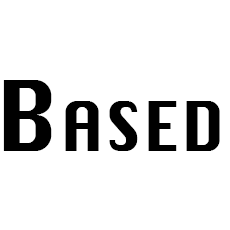
<style>
.page{position:relative;width:230px;height:230px;background:#ffffff}
.page>*{position:absolute;margin:0}
.t1{font:94.8px "Silom";color:#000000;font-variant:small-caps}
</style>
<div class="page">
<p class="t1" style="left:3px;top:80px;width:217px;height:71px">Based</p>
</div>
